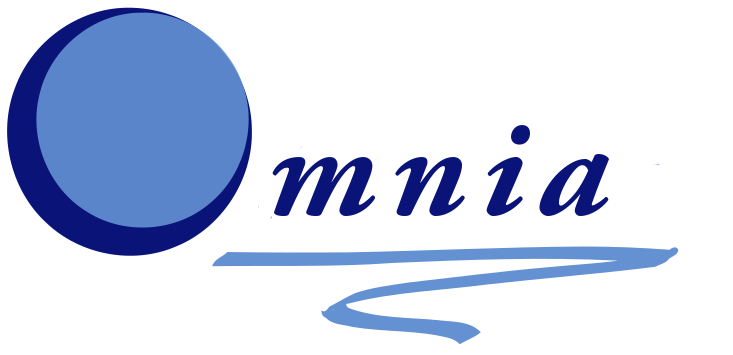
<style>
.page{position:relative;width:733px;height:355px;background:#ffffff}
.page>*{position:absolute;margin:0}
.t1{font:140px "AGaramondPro-BoldItalic";letter-spacing:0.1em;color:#0a1478}
</style>
<div class="page">
<p class="t1" style="left:272px;top:125px;width:337px;height:91px">mnia</p>
</div>
